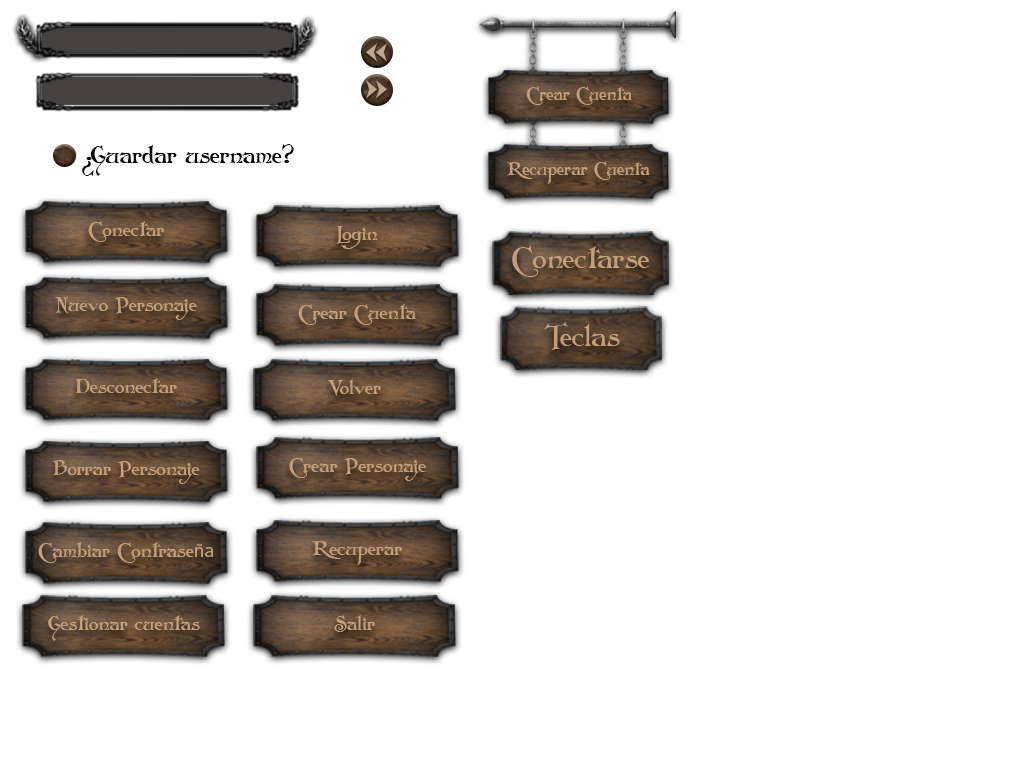
<style>
.page{position:relative;width:1024px;height:768px;background:#ffffff}
.page>*{position:absolute;margin:0}
.t1{font:17.6px "Folkard";color:#c49e78}
.t2{font:23.9px "Folkard";color:#000000}
.t3{font:19.7px "Folkard";color:#c49e78}
.t4{font:29.2px "Folkard";color:#c49e78}
.t5{font:19.7px "MyriadPro-Regular";color:#c49e78}
</style>
<div class="page">
<p class="t1" style="left:526px;top:86px;width:106px;height:19px">Crear Cuenta</p>
<p class="t2" style="left:90px;top:144px;width:204px;height:32px">Guardar username?</p>
<p class="t2" style="left:82px;top:157px;width:12px;height:19px;rotate:180deg">?</p>
<p class="t1" style="left:507px;top:161px;width:143px;height:23px">Recuperar Cuenta</p>
<p class="t3" style="left:88px;top:221px;width:76px;height:21px">Conectar</p>
<p class="t3" style="left:336px;top:226px;width:42px;height:23px">Login</p>
<p class="t4" style="left:512px;top:245px;width:137px;height:32px">Conectarse</p>
<p class="t3" style="left:55px;top:297px;width:142px;height:23px">Nuevo Personaje</p>
<p class="t3" style="left:298px;top:304px;width:118px;height:21px">Crear Cuenta</p>
<p class="t4" style="left:544px;top:322px;width:76px;height:28px">Teclas</p>
<p class="t3" style="left:75px;top:378px;width:102px;height:15px">Desconectar</p>
<p class="t3" style="left:328px;top:379px;width:53px;height:17px">Volver</p>
<p class="t3" style="left:53px;top:460px;width:147px;height:24px">Borrar Personaje</p>
<p class="t3" style="left:289px;top:457px;width:137px;height:24px">Crear Personaje</p>
<p class="t3" style="left:38px;top:542px;width:175px;height:21px">Cambiar Contrase<span class="t5">ña</span></p>
<p class="t3" style="left:312px;top:541px;width:90px;height:24px">Recuperar</p>
<p class="t3" style="left:48px;top:615px;width:152px;height:26px">Gestionar cuentas</p>
<p class="t3" style="left:334px;top:615px;width:41px;height:17px">Salir</p>
</div>
